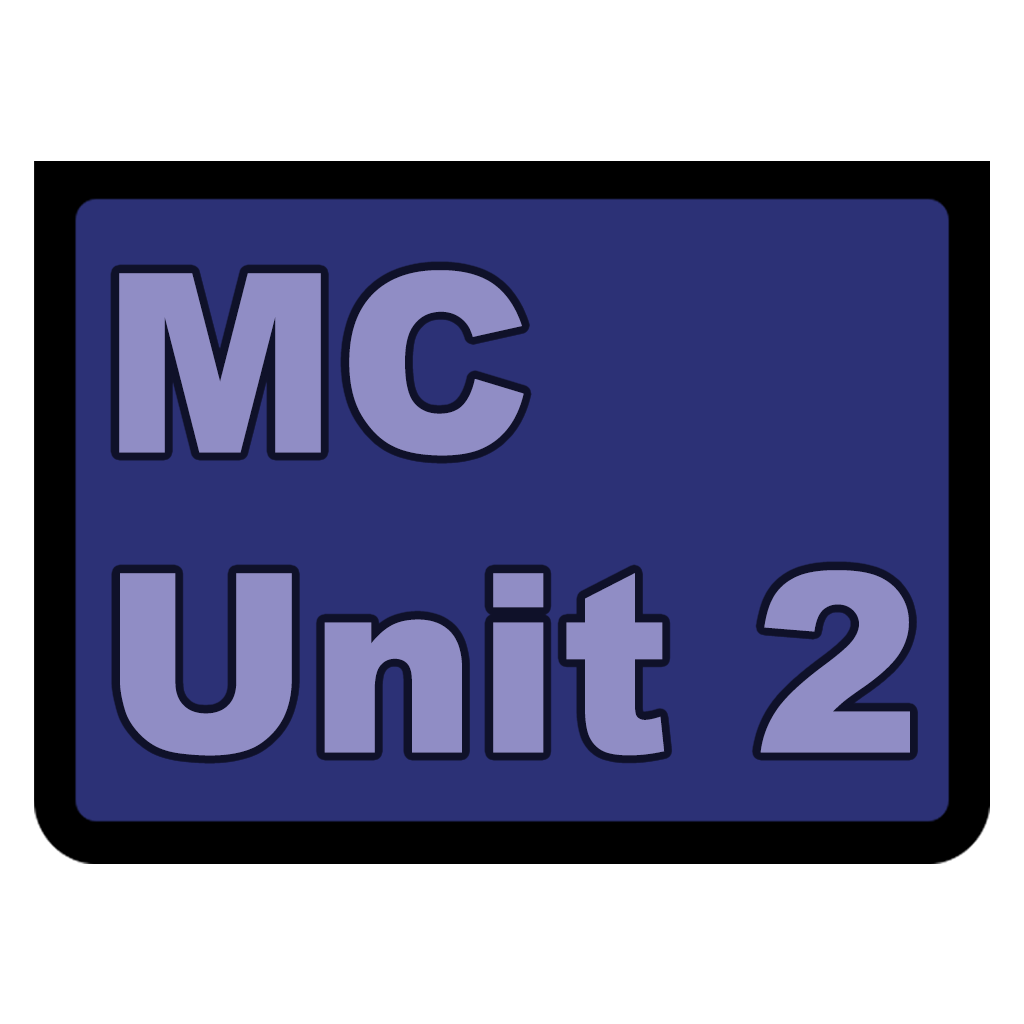
<style>
.page{position:relative;width:1024px;height:1024px;background:#ffffff}
.page>*{position:absolute;margin:0}
.t1{font:250px "Arial-Black";color:#908dc5}
</style>
<div class="page">
<p class="t1" style="left:119px;top:270px;width:791px;height:486px">MC<br>Unit 2</p>
</div>
